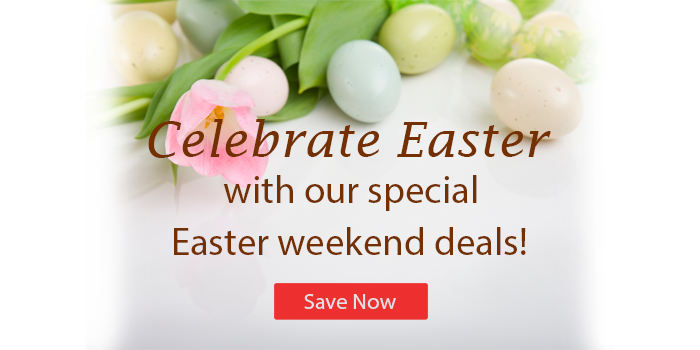
<style>
.page{position:relative;width:700px;height:350px;background:#ffffff}
.page>*{position:absolute;margin:0}
.t1{font:49px "LucidaFax-Italic";color:#743000}
.t2{font:38.7px "MyriadPro-Regular";color:#743000}
.t3{font:22.4px "MyriadPro-Regular";color:#e0e2e4}
</style>
<div class="page">
<p class="t1" style="left:148px;top:119px;width:403px;height:39px">Celebrate Easter</p>
<p class="t2" style="left:223px;top:175px;width:254px;height:36px">with our special</p>
<p class="t2" style="left:174px;top:227px;width:352px;height:28px">Easter weekend deals!</p>
<p class="t3" style="left:304px;top:294px;width:92px;height:15px">Save Now</p>
</div>
